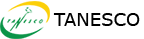
<style>
.page{position:relative;width:144px;height:39px;background:#ffffff}
.page>*{position:absolute;margin:0}
.t1{font:18px "Verdana";color:#000000}
</style>
<div class="page">
<p class="t1" style="left:53px;top:13px;width:87px;height:13px">TANESCO</p>
</div>
